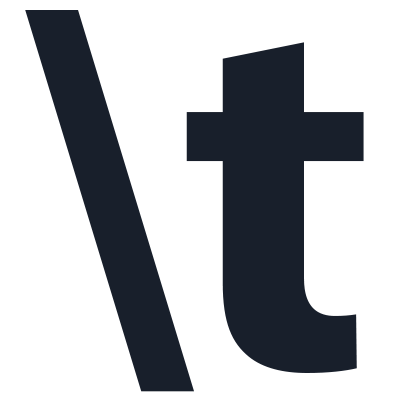
<style>
.page{position:relative;width:400px;height:400px;background:#ffffff}
.page>*{position:absolute;margin:0}
.t1{font:528.1px "MyriadPro-BoldCond";color:#19202c;scale:1.17 1}
</style>
<div class="page">
<p class="t1" style="left:25px;top:10px;width:339px;height:382px">\t</p>
</div>
